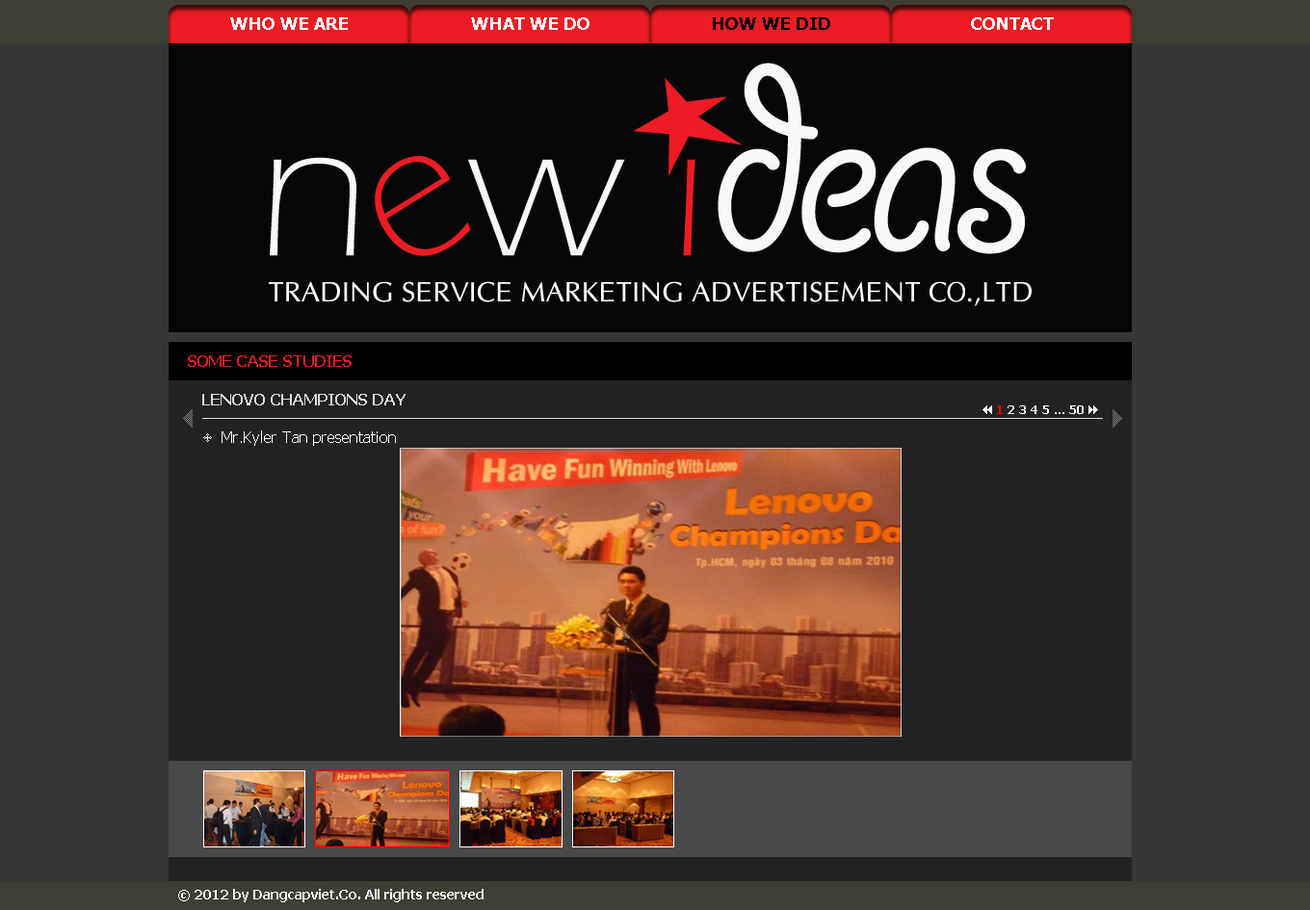
<style>
.page{position:relative;width:1310px;height:910px;background:#383636}
.page>*{position:absolute;margin:0}
.t1{font:17.3px "Tahoma-Bold";color:#ffffff}
.t2{font:17.3px "Tahoma-Bold";color:#000000}
.t3{font:15.4px "Tahoma-Bold";color:#ed1c24}
.t4{font:15.4px "Tahoma-Bold";color:#dcdcdc;text-transform:uppercase}
.t5{font:12.5px "Tahoma-Bold";color:#fffefe}
.t6{font:12.5px "Tahoma-Bold";color:#fe0000}
.t7{font:15.4px "Tahoma";color:#fffefe}
.t8{font:13.5px "Tahoma-Bold";color:#ffffff}
</style>
<div class="page">
<p class="t1" style="left:230px;top:17px;width:118px;height:13px">WHO WE ARE</p>
<p class="t1" style="left:471px;top:17px;width:118px;height:13px">WHAT WE DO</p>
<p class="t2" style="left:713px;top:17px;width:117px;height:13px">HOW WE DID</p>
<p class="t1" style="left:971px;top:17px;width:83px;height:13px">CONTACT</p>
<p class="t3" style="left:188px;top:355px;width:164px;height:12px">SOME CASE STUDIES</p>
<p class="t4" style="left:202px;top:394px;width:204px;height:12px">LENOVO CHAMPIONS DAY</p>
<p class="t5" style="left:997px;top:406px;width:87px;height:8px"><span class="t6">1</span> 2 3 4 5 ... 50</p>
<p class="t7" style="left:222px;top:431px;width:174px;height:15px">Mr.Kyler Tan presentation</p>
<p class="t8" style="left:178px;top:889px;width:306px;height:14px">© 2012 by Dangcapviet.Co. All rights reserved</p>
</div>
